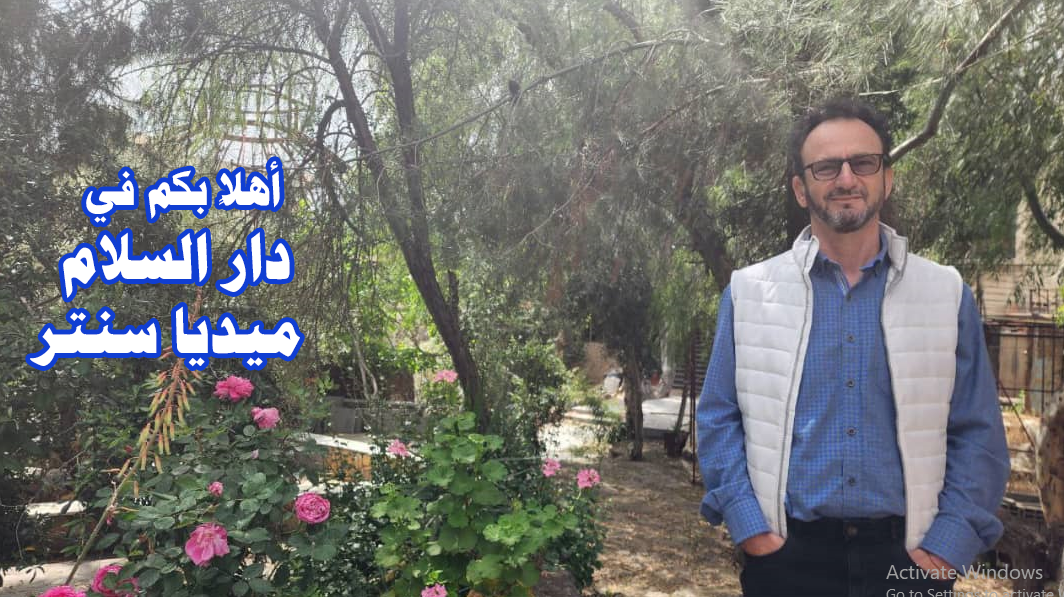
<style>
.page{position:relative;width:1064px;height:597px}
.page>*{position:absolute;margin:0}
.t1{font:62px "PTBoldHeading";color:#ffffff}
.t2{font:45px "PTBoldHeading";color:#ffffff}
</style>
<div class="page">
<p class="t1" style="left:30px;top:161px;width:270px;height:206px;text-align:center"><span class="t2"> ﻲﻓ ﻢﻜﺑ ًﻼﻫﺃ<br></span> ﻡﻼﺴﻟﺍ ﺭﺍﺩ <br>ﺮﺘﻨﺳ ﺎﻳﺪﻴﻣ</p>
</div>
